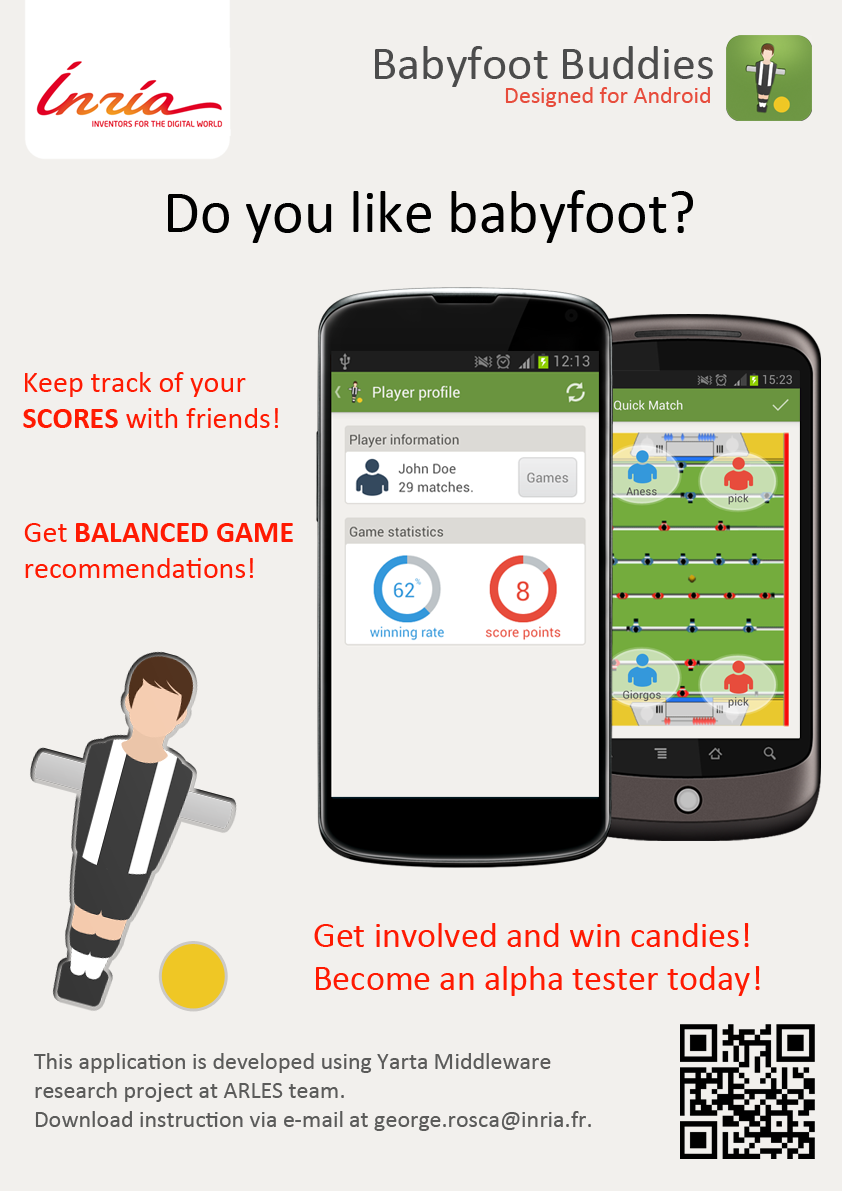
<style>
.page{position:relative;width:842px;height:1191px;background:#f2f0ed}
.page>*{position:absolute;margin:0}
.t1{font:48px "Calibri";color:#4c4c4c}
.t2{font:24px "Calibri";color:#e74c3c}
.t3{font:60px "Calibri";color:#000000}
.t4{font:30px "Calibri";color:#ff1a02}
.t5{font:30px "Calibri-Bold";color:#ff1a02}
.t6{font:36px "Calibri";color:#ff1a02}
.t7{font:24px "Calibri";color:#5b5b5a}
</style>
<div class="page">
<p class="t1" style="left:375px;top:46px;width:338px;height:41px">Babyfoot Buddies</p>
<p class="t2" style="left:505px;top:87px;width:205px;height:20px">Designed for Android</p>
<p class="t3" style="left:168px;top:190px;width:525px;height:53px">Do you like babyfoot?</p>
<p class="t4" style="left:23px;top:372px;width:255px;height:56px">Keep track of your<br><span class="t5">SCORES </span>with friends!</p>
<p class="t4" style="left:24px;top:523px;width:269px;height:55px">Get <span class="t5">BALANCED GAME<br></span>recommendations!</p>
<p class="t6" style="left:314px;top:923px;width:446px;height:73px">Get involved and win candies!<br>Become an alpha tester today!</p>
<p class="t7" style="left:34px;top:1053px;width:557px;height:78px">This application is developed using Yarta Middleware<br>research project at ARLES team.<br>Download instruction via e-mail at george.rosca@inria.fr.</p>
</div>
